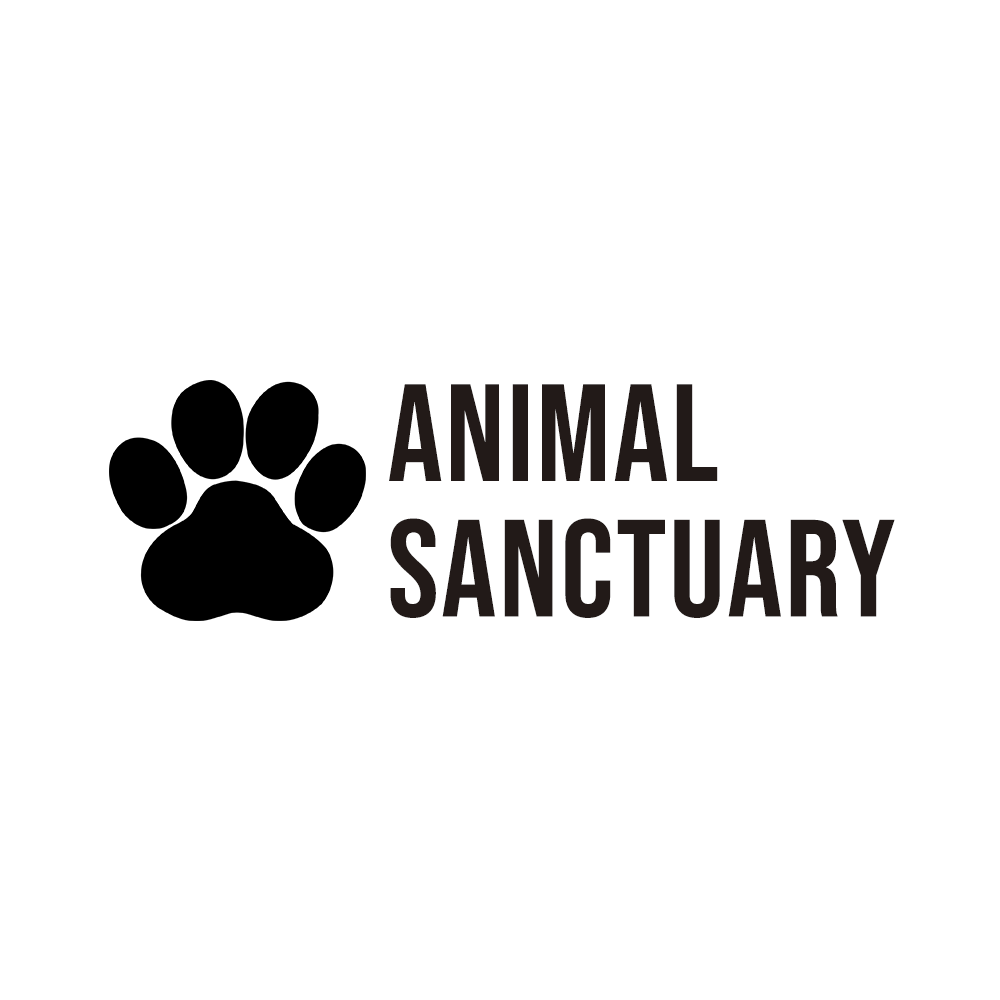
<style>
.page{position:relative;width:1000px;height:1000px;background:#ffffff}
.page>*{position:absolute;margin:0}
.t1{font:137.8px/135.5px "BebasNeue-Regular";letter-spacing:0.02em;color:#221a18}
</style>
<div class="page">
<p class="t1" style="left:389px;top:384px;width:506px;height:234px">Animal<br>Sanctuary</p>
</div>
